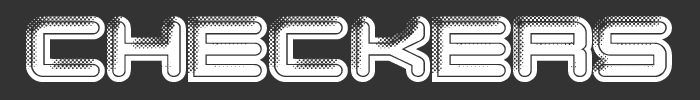
<style>
.page{position:relative;width:700px;height:100px;background:#333333}
.page>*{position:absolute;margin:0}
.t1{font:80px "BumpPad";color:#ffffff}
</style>
<div class="page">
<p class="t1" style="left:26px;top:16px;width:646px;height:66px">CHECKERS</p>
</div>
